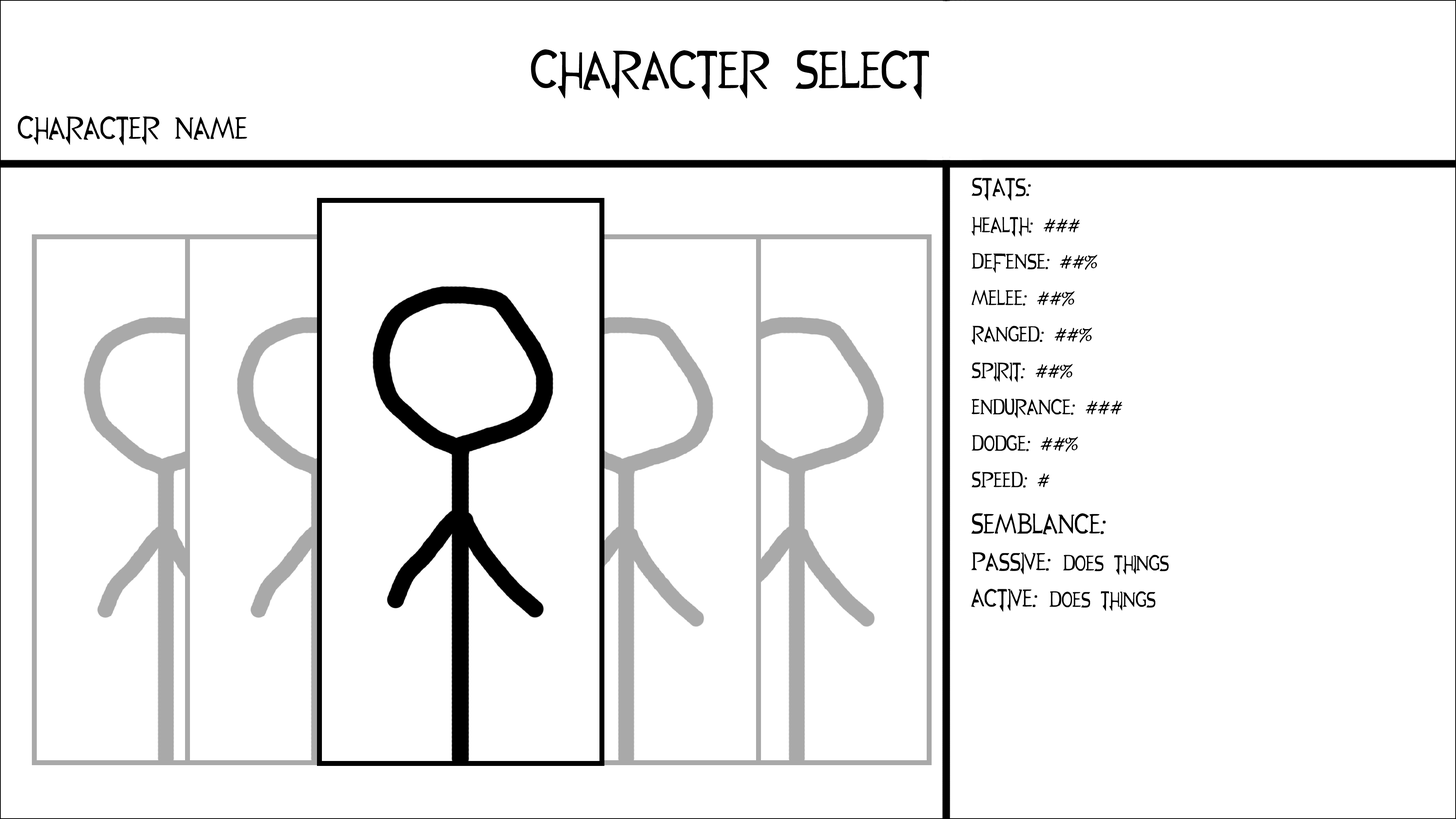
<style>
.page{position:relative;width:1456px;height:819px;background:#ffffff}
.page>*{position:absolute;margin:0}
.t1{font:60.7px "RWBY_Style";color:#000000}
.t2{font:36px "RWBY_Style";color:#000000}
.t3{font:24.6px/9.1px "RWBY_Style";color:#000000}
.t4{font:28.4px/9.1px "RWBY_Style";color:#000000}
.t5{font:32.2px/9.1px "RWBY_Style";color:#000000}
</style>
<div class="page">
<p class="t1" style="left:531px;top:49px;width:398px;height:50px">Character Select</p>
<p class="t2" style="left:18px;top:116px;width:229px;height:30px">Character Name</p>
<p class="t3" style="left:971px;top:178px;width:151px;height:310px"><span class="t4">Stats:<br><br><br><br></span>Health: ###<br><br><br><br>Defense: ##%<br><br><br><br>Melee: ##%<br><br><br><br>Ranged: ##%<br><br><br><br>Spirit: ##%<br><br><br><br>Endurance: ###<br><br><br><br>Dodge: ##%<br><br><br><br>Speed: #</p>
<p class="t3" style="left:971px;top:513px;width:198px;height:99px"><span class="t5">Semblance:<br><br><br><br></span><span class="t4">Passive: </span>Does things<br><span class="t4"><br><br><br>Active: </span>Does Things</p>
</div>
